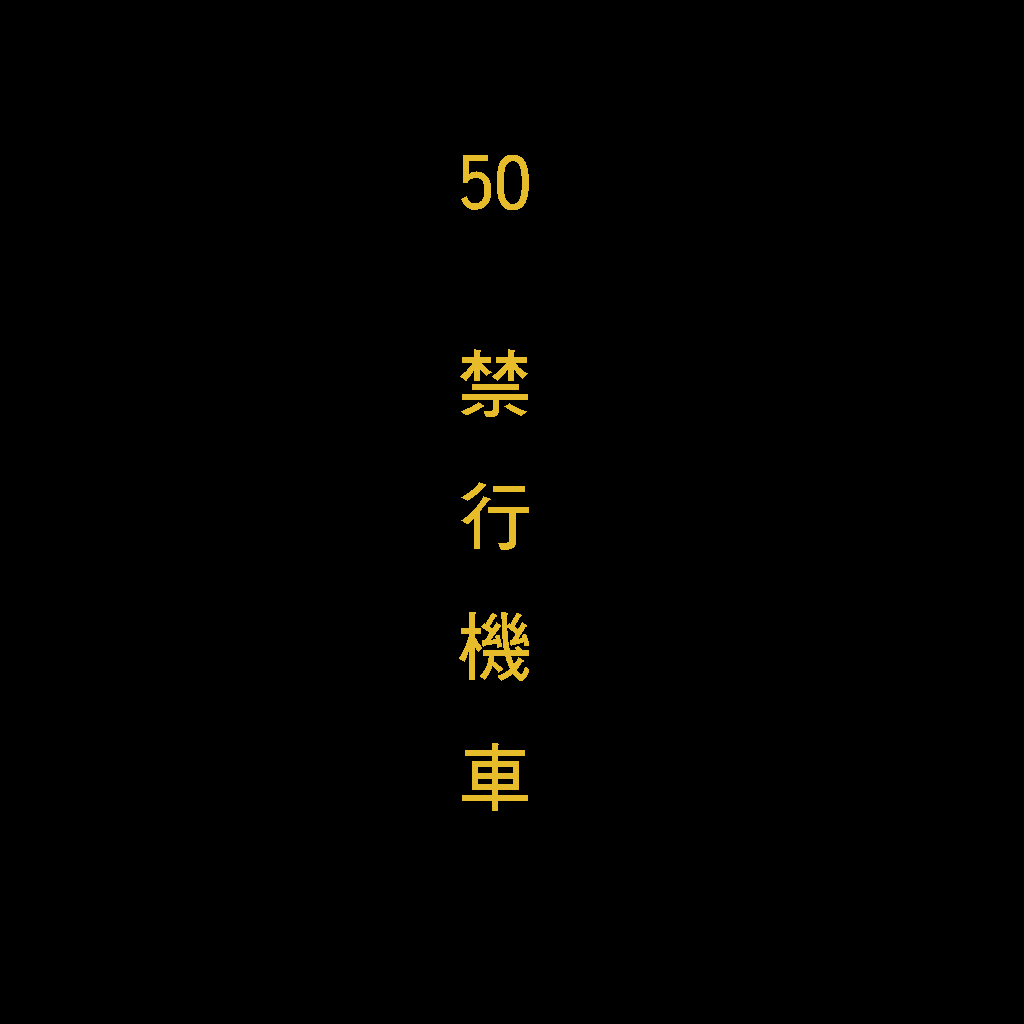
<style>
.page{position:relative;width:1024px;height:1024px;background:#000000}
.page>*{position:absolute;margin:0}
.t1{font:75px "DFHei-W7-WIN-BF";color:#e7bc2a}
.t2{font:75px/200px "DFHei-W7-WIN-BF";color:#e7bc2a}
</style>
<div class="page">
<p class="t1" style="left:459px;top:155px;width:70px;height:656px"><span class="t2">50 </span>禁行機車</p>
</div>
